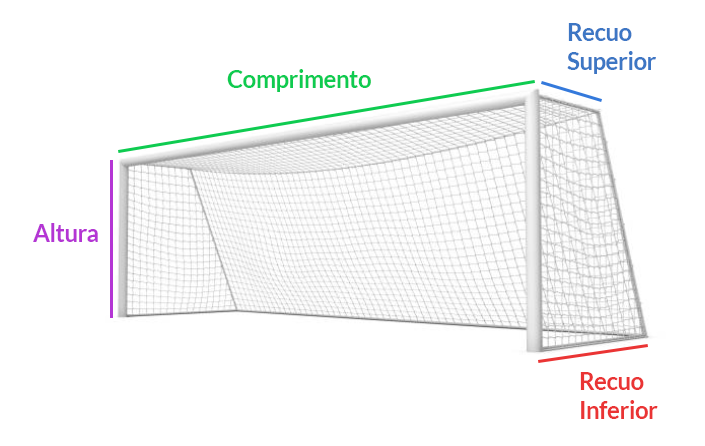
<style>
.page{position:relative;width:705px;height:446px;background:#ffffff}
.page>*{position:absolute;margin:0}
.t1{font:24px "Lato-Bold";letter-spacing:-0.02em;color:#3d76c4}
.t2{font:24px "Lato-Bold";letter-spacing:-0.02em;color:#0ecb50}
.t3{font:24px "Lato-Bold";letter-spacing:-0.02em;color:#b435d4}
.t4{font:24px "Lato-Bold";letter-spacing:-0.02em;color:#ea3434}
</style>
<div class="page">
<p class="t1" style="left:567px;top:23px;width:89px;height:51px">Recuo<br>Superior</p>
<p class="t2" style="left:227px;top:69px;width:144px;height:23px">Comprimento</p>
<p class="t3" style="left:33px;top:223px;width:65px;height:19px">Altura</p>
<p class="t4" style="left:580px;top:372px;width:78px;height:47px">Recuo<br>Inferior</p>
</div>
